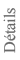
<style>
.page{position:relative;width:20px;height:60px;background:#ffffff}
.page>*{position:absolute;margin:0}
.t1{font:16px "TimesNewRomanPSMT";color:#686868}
</style>
<div class="page">
<p class="t1" style="left:3px;top:8px;width:13px;height:45px;rotate:-90deg">Détails</p>
</div>
